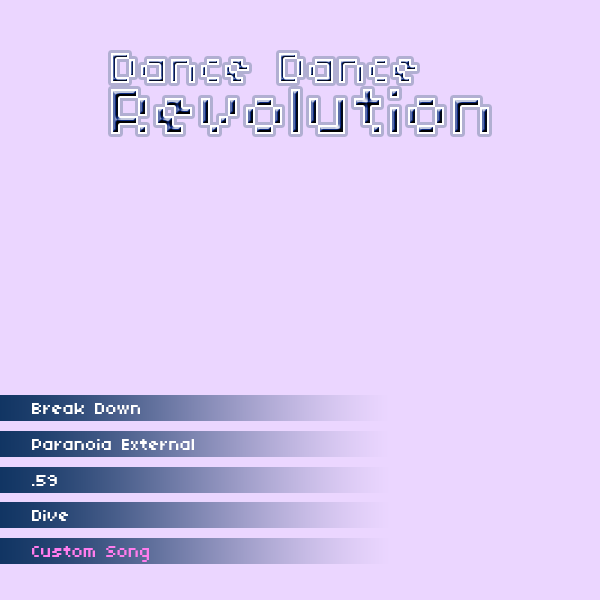
<style>
.page{position:relative;width:600px;height:600px;background:#ebd6ff}
.page>*{position:absolute;margin:0}
.t1{font:18px "04b03";color:#ffffff}
.t2{font:18px "04b03";color:#ff7dee}
</style>
<div class="page">
<p class="t1" style="left:32px;top:403px;width:108px;height:11px">Break Down</p>
<p class="t1" style="left:32px;top:439px;width:162px;height:11px">Paranoia External</p>
<p class="t1" style="left:32px;top:475px;width:25px;height:11px">.59</p>
<p class="t1" style="left:32px;top:510px;width:36px;height:11px">Dive</p>
<p class="t2" style="left:32px;top:546px;width:117px;height:16px">Custom Song</p>
</div>
